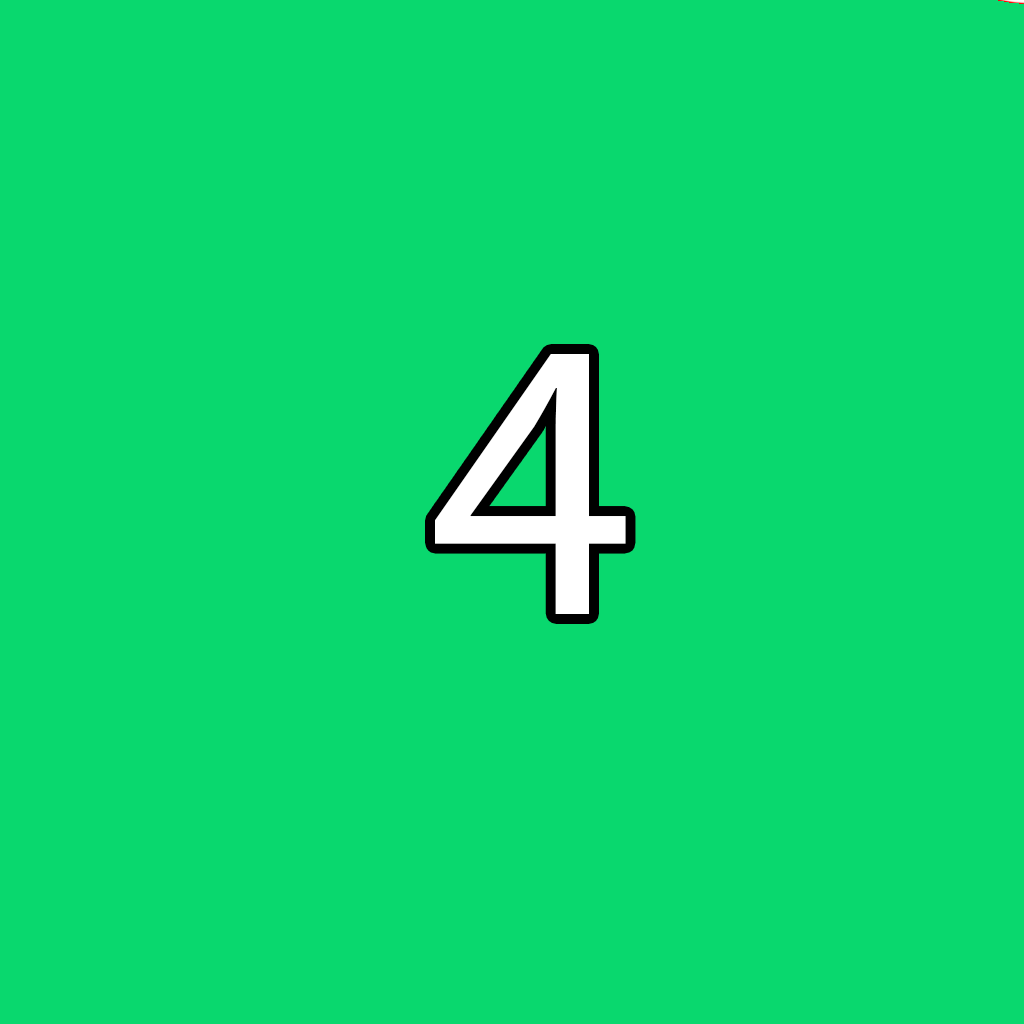
<style>
.page{position:relative;width:1024px;height:1024px;background:#09d86e}
.page>*{position:absolute;margin:0}
.t1{font:400px "MyriadPro-Regular";color:#ffffff}
</style>
<div class="page">
<p class="t1" style="left:435px;top:354px;width:191px;height:260px">4</p>
</div>
